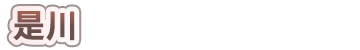
<style>
.page{position:relative;width:360px;height:50px;background:#ffffff}
.page>*{position:absolute;margin:0}
.t1{font:32px "SourceHanSansSC-Bold";font-weight:bold}
</style>
<div class="page">
<p class="t1" style="left:13px;top:11px;width:62px;height:30px">是川</p>
</div>
